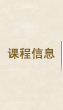
<style>
.page{position:relative;width:63px;height:110px;background:#ede5d5}
.page>*{position:absolute;margin:0}
.t1{font:12px "SimHei";color:#7d5f24}
</style>
<div class="page">
<p class="t1" style="left:7px;top:47px;width:48px;height:12px">课程信息</p>
</div>
